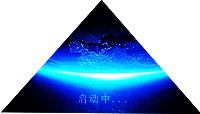
<style>
.page{position:relative;width:200px;height:114px;background:#ffffff}
.page>*{position:absolute;margin:0}
.t1{font:10px "SimSun";letter-spacing:0.1em;color:#00e4e9;text-transform:uppercase;font-weight:bold}
</style>
<div class="page">
<p class="t1" style="left:78px;top:94px;width:49px;height:10px">启动中...</p>
</div>
